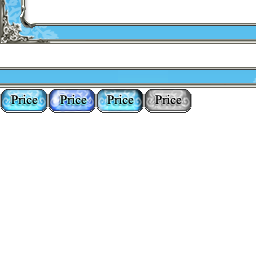
<style>
.page{position:relative;width:256px;height:256px;background:#ffffff}
.page>*{position:absolute;margin:0}
.t1{font:13px "TimesNewRomanPSMT";color:#000000}
</style>
<div class="page">
<p class="t1" style="left:11px;top:94px;width:27px;height:11px">Price</p>
<p class="t1" style="left:60px;top:94px;width:27px;height:11px">Price</p>
<p class="t1" style="left:107px;top:94px;width:27px;height:11px">Price</p>
<p class="t1" style="left:155px;top:94px;width:27px;height:11px">Price</p>
</div>
